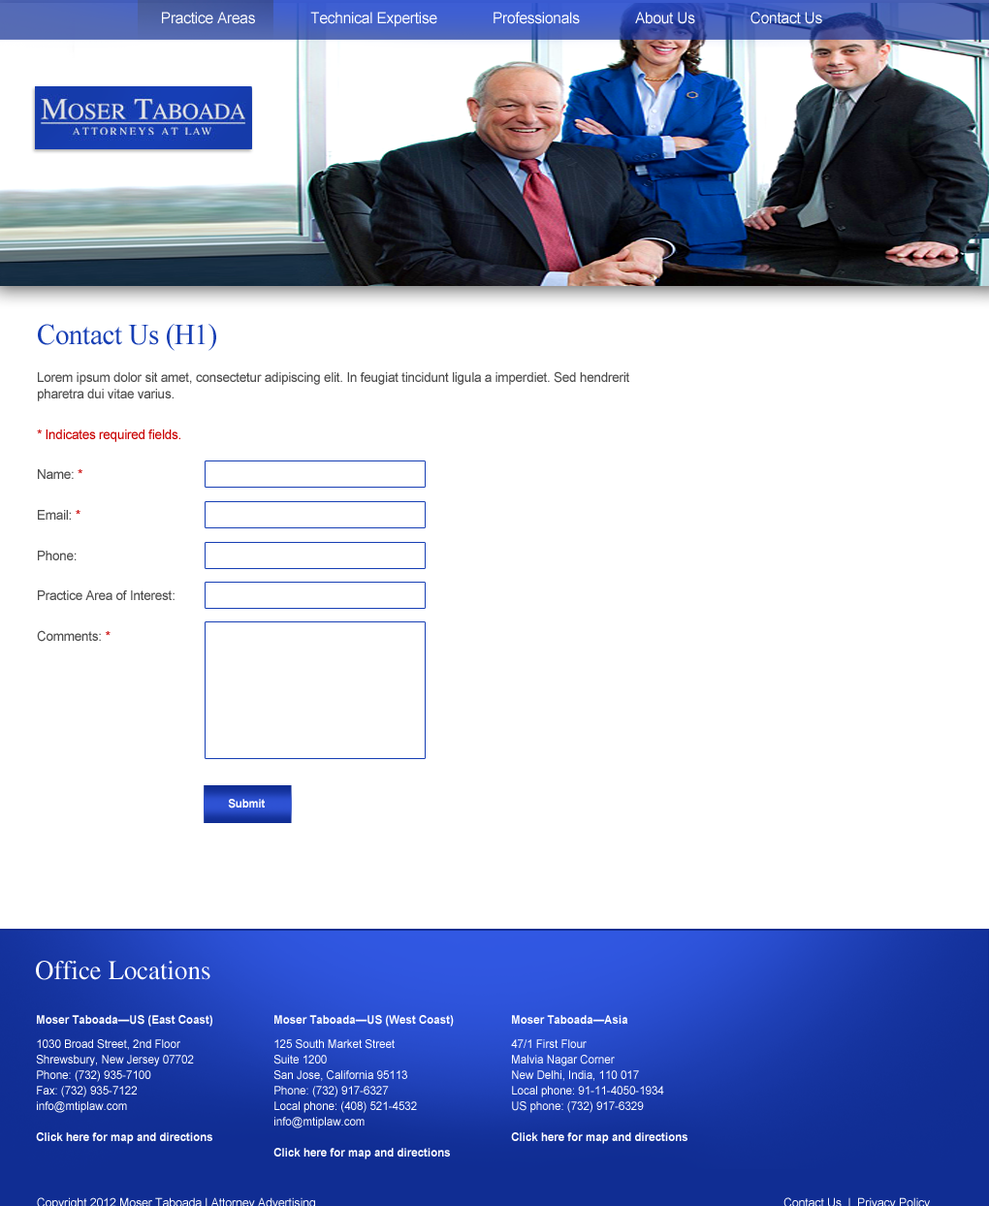
<style>
.page{position:relative;width:989px;height:1206px;background:#ffffff}
.page>*{position:absolute;margin:0}
.t1{font:15.5px "ArialMT";letter-spacing:-0.012em;color:#ffffff;scale:0.96 1}
.t2{font:13.6px "ArialMT";letter-spacing:-0.015em;color:#4c4c4c;scale:0.96 1}
.t3{font:29.1px "TimesNewRomanPSMT";letter-spacing:-0.01em;color:#163eb4;scale:0.96 1}
.t4{font:13.6px "ArialMT";letter-spacing:-0.015em;color:#c90000;scale:0.96 1}
.t5{font:11.6px "Arial-BoldMT";letter-spacing:-0.015em;color:#ffffff;scale:0.96 1}
.t6{font:27.1px "Times-Roman";color:#ffffff;scale:0.96 1}
.t7{font:11.6px/11.6px "ArialMT";color:#ffffff;scale:0.96 1}
.t8{font:11.6px/11.6px "Arial-BoldMT";color:#ffffff;scale:0.96 1}
</style>
<div class="page">
<p class="t1" style="left:162px;top:12px;width:660px;height:15px">Practice Areas              Technical Expertise              Professionals              About Us              Contact Us</p>
<p class="t2" style="left:37px;top:324px;width:592px;height:318px"><span class="t3">Contact Us (H1)<br><br></span>Lorem ipsum dolor sit amet, consectetur adipiscing elit. In feugiat tincidunt ligula a imperdiet. Sed hendrerit pharetra dui vitae varius.<br><br><span class="t4">* Indicates required fields.<br><br></span>Name: <span class="t4">*<br></span><br>Email: <span class="t4">*<br></span><br>Phone:<br><br>Practice Area of Interest:<br><br>Comments: <span class="t4">*</span></p>
<p class="t5" style="left:228px;top:799px;width:37px;height:9px">Submit</p>
<p class="t6" style="left:36px;top:961px;width:174px;height:19px">Office Locations</p>
<p class="t7" style="left:36px;top:1015px;width:176px;height:129px"><span class="t8">Moser Taboada—US (East Coast)<br><br></span>1030 Broad Street, 2nd Floor <br>Shrewsbury, New Jersey 07702<br>Phone: (732) 935-7100<br>Fax: (732) 935-7122<br>info@mtiplaw.com<br><br><span class="t8">Click here for map and directions</span></p>
<p class="t7" style="left:273px;top:1015px;width:181px;height:144px"><span class="t8">Moser Taboada—US (West Coast)<br><br></span>125 South Market Street<br>Suite 1200<br>San Jose, California 95113<br>Phone: (732) 917-6327<br>Local phone: (408) 521-4532<br>info@mtiplaw.com<br><br><span class="t8">Click here for map and directions</span></p>
<p class="t7" style="left:511px;top:1015px;width:176px;height:129px"><span class="t8">Moser Taboada—Asia<br><br></span>47/1 First Flour<br>Malvia Nagar Corner<br>New Delhi, India, 110 017<br>Local phone: 91-11-4050-1934<br>US phone: (732) 917-6329<br><br><span class="t8">Click here for map and directions</span></p>
</div>
